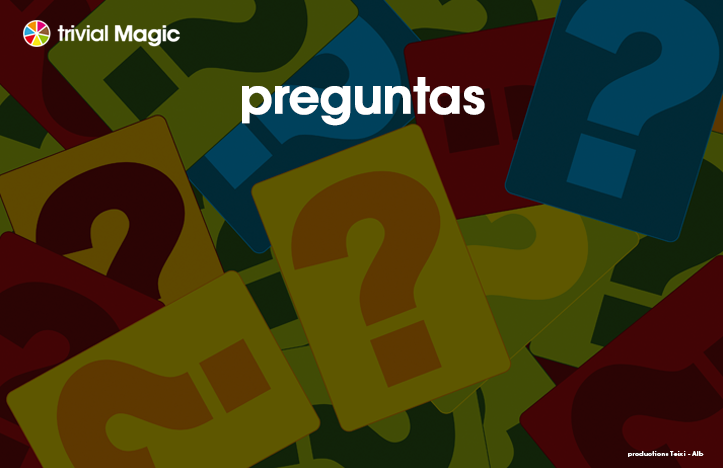
<style>
.page{position:relative;width:723px;height:468px}
.page>*{position:absolute;margin:0}
.t1{font:48px "ITCAvantGardeStd-Demi";letter-spacing:-0.025em;color:#ffffff;font-weight:bold}
.t2{font:5.5px "ITCAvantGardeStd-Demi";letter-spacing:0.075em;color:#ffffff;scale:1.09 1}
</style>
<div class="page">
<p class="t1" style="left:242px;top:77px;width:243px;height:49px">preguntas</p>
<p class="t2" style="left:628px;top:451px;width:76px;height:6px">productions Teixi - Alb</p>
</div>
